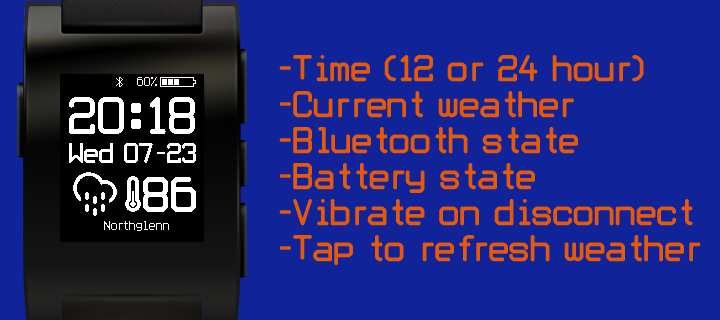
<style>
.page{position:relative;width:720px;height:320px;background:#102398}
.page>*{position:absolute;margin:0}
.t1{font:30px "Obliviousfont";color:#e3590e}
</style>
<div class="page">
<p class="t1" style="left:279px;top:55px;width:422px;height:210px">-Time (12 or 24 hour)<br>-Current weather <br>-Bluetooth state<br>-Battery state <br>-Vibrate on disconnect<br>-Tap to refresh weather</p>
</div>
